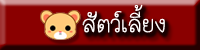
<style>
.page{position:relative;width:200px;height:50px;background:#8a0000}
.page>*{position:absolute;margin:0}
.t1{font:36px "THMaliGrade6-Bold";color:#fefefe}
</style>
<div class="page">
<p class="t1" style="left:82px;top:4px;width:83px;height:29px">สัตว์เลี้ยง</p>
</div>
